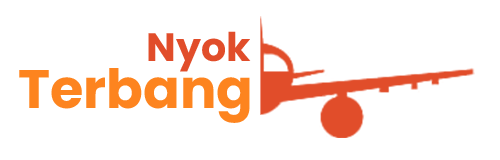
<style>
.page{position:relative;width:500px;height:160px;background:#ffffff}
.page>*{position:absolute;margin:0}
.t1{font:39.6px "Poppins-Bold";color:#e14d2a}
.t2{font:54.2px "Poppins-Bold";color:#fd841f}
</style>
<div class="page">
<p class="t1" style="left:148px;top:31px;width:103px;height:41px">Nyok</p>
<p class="t2" style="left:19px;top:68px;width:231px;height:55px">Terbang</p>
</div>
